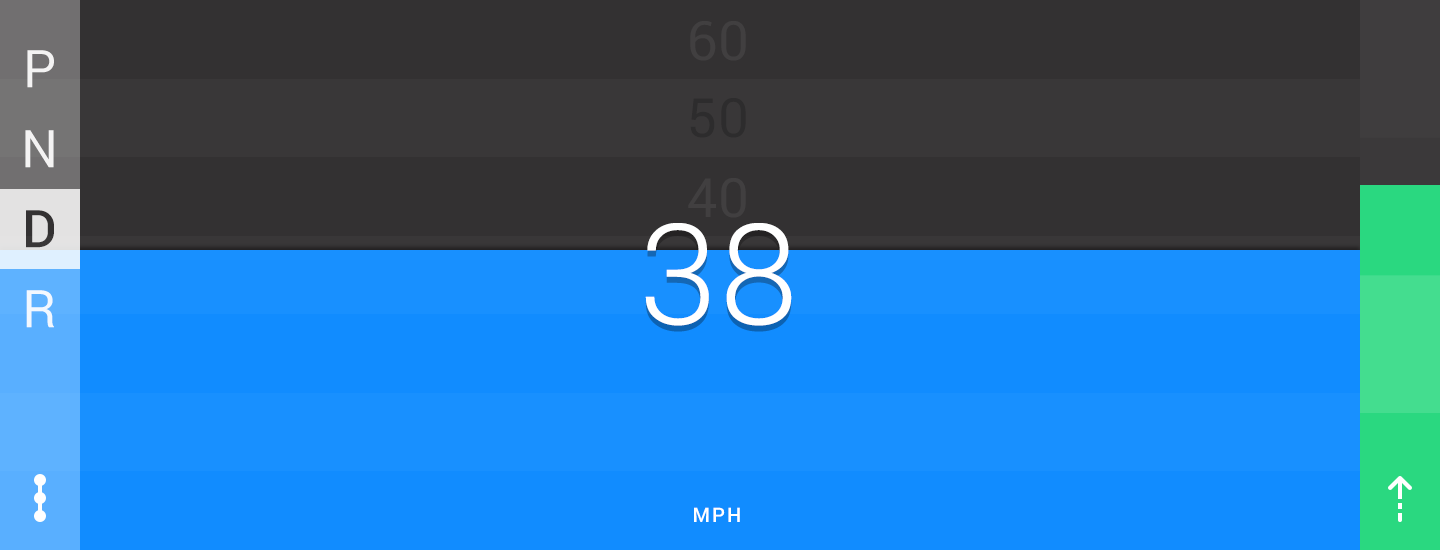
<style>
.page{position:relative;width:1440px;height:550px;background:#118cff}
.page>*{position:absolute;margin:0}
.t1{font:54.2px "Roboto-Regular";letter-spacing:0.02em;color:#413f40}
.t2{font:52px "Roboto-Regular";color:#f4f3f3}
.t3{font:54.2px "Roboto-Regular";letter-spacing:0.02em;color:#2d2c2d}
.t4{font:52px "Roboto-Regular";color:#ffffff}
.t5{font:52px "Roboto-Medium";color:#333132}
.t6{font:140px "Roboto-Light";letter-spacing:0.02em;color:#ffffff}
.t7{font:20px "Roboto-Medium";letter-spacing:0.1em;color:#ffffff}
</style>
<div class="page">
<p class="t1" style="left:690px;top:21px;width:56px;height:40px">60</p>
<p class="t2" style="left:27px;top:50px;width:27px;height:38px">P</p>
<p class="t3" style="left:690px;top:98px;width:56px;height:40px">50</p>
<p class="t4" style="left:25px;top:130px;width:29px;height:38px;opacity:0.9">N</p>
<p class="t1" style="left:688px;top:178px;width:58px;height:40px">40</p>
<p class="t5" style="left:26px;top:210px;width:28px;height:38px">D</p>
<p class="t6" style="left:645px;top:223px;width:147px;height:103px">38</p>
<p class="t4" style="left:26px;top:290px;width:28px;height:38px;opacity:0.9">R</p>
<p class="t7" style="left:694px;top:507px;width:46px;height:15px">MPH</p>
</div>
